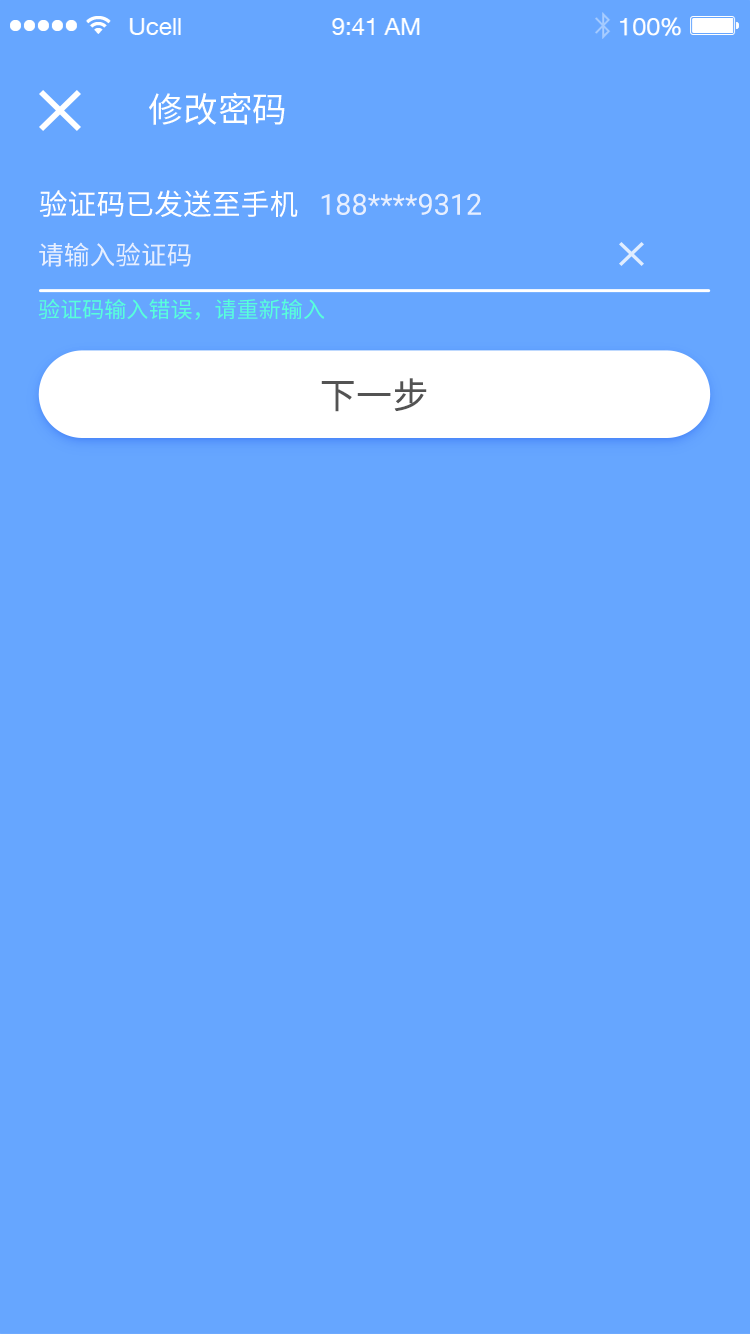
<style>
.page{position:relative;width:750px;height:1334px;background:#66a6ff}
.page>*{position:absolute;margin:0}
.t1{font:34.7px "NotoSansHans-Regular";color:#ffffff}
.t2{font:29px "NotoSansHans-Regular";color:#ffffff;text-transform:uppercase}
.t3{font:29px "Roboto-Regular";color:#e6efff;text-transform:uppercase}
.t4{font:25.9px "NotoSansHans-Regular";color:#e6efff;text-transform:uppercase}
.t5{font:22px "NotoSansHans-Regular";color:#57ffda;text-transform:uppercase}
.t6{font:35.9px "NotoSansHans-Regular";letter-spacing:0.02em;color:#535353}
</style>
<div class="page">
<p class="t1" style="left:149px;top:92px;width:136px;height:33px">修改密码</p>
<p class="t2" style="left:39px;top:190px;width:259px;height:28px">验证码已发送至手机</p>
<p class="t3" style="left:321px;top:193px;width:160px;height:22px">188****9312</p>
<p class="t4" style="left:39px;top:242px;width:152px;height:25px">请输入验证码</p>
<p class="t5" style="left:38px;top:299px;width:287px;height:21px">验证码输入错误，请重新输入</p>
<p class="t6" style="left:321px;top:378px;width:106px;height:34px">下一步</p>
</div>
